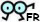
<style>
.page{position:relative;width:40px;height:22px}
.page>*{position:absolute;margin:0}
.t1{font:10.7px "ComicSansMS-Bold";color:#000000}
</style>
<div class="page">
<p class="t1" style="left:26px;top:13px;width:14px;height:8px">FR</p>
</div>
